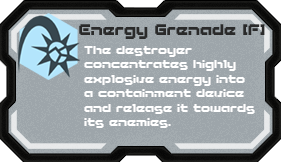
<style>
.page{position:relative;width:281px;height:162px;background:#9da5aa}
.page>*{position:absolute;margin:0}
.t1{font:16px "BMarmyA12";color:#2a2a2a}
.t2{font:12px "BMarmyA12";color:#ffffff}
</style>
<div class="page">
<p class="t1" style="left:79px;top:24px;width:186px;height:15px">Energy Grenade [F]</p>
<p class="t2" style="left:84px;top:46px;width:171px;height:82px">The destroyer <br>concentrates highly<br>explosive energy into <br>a containment device <br>and release it towards <br>its enemies.</p>
</div>
